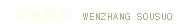
<style>
.page{position:relative;width:180px;height:24px;background:#ffffff}
.page>*{position:absolute;margin:0}
.t1{font:15px "SimHei";color:#fff9e6}
.t2{font:11px "SimHei";color:#b0b08c}
</style>
<div class="page">
<p class="t1" style="left:14px;top:8px;width:58px;height:14px">文章搜索</p>
<p class="t2" style="left:83px;top:13px;width:89px;height:7px">WENZHANG SOUSUO</p>
</div>
